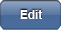
<style>
.page{position:relative;width:61px;height:30px}
.page>*{position:absolute;margin:0}
.t1{font:12px "Helvetica-Bold";color:#ffffff}
</style>
<div class="page">
<p class="t1" style="left:20px;top:10px;width:23px;height:9px">Edit</p>
</div>
